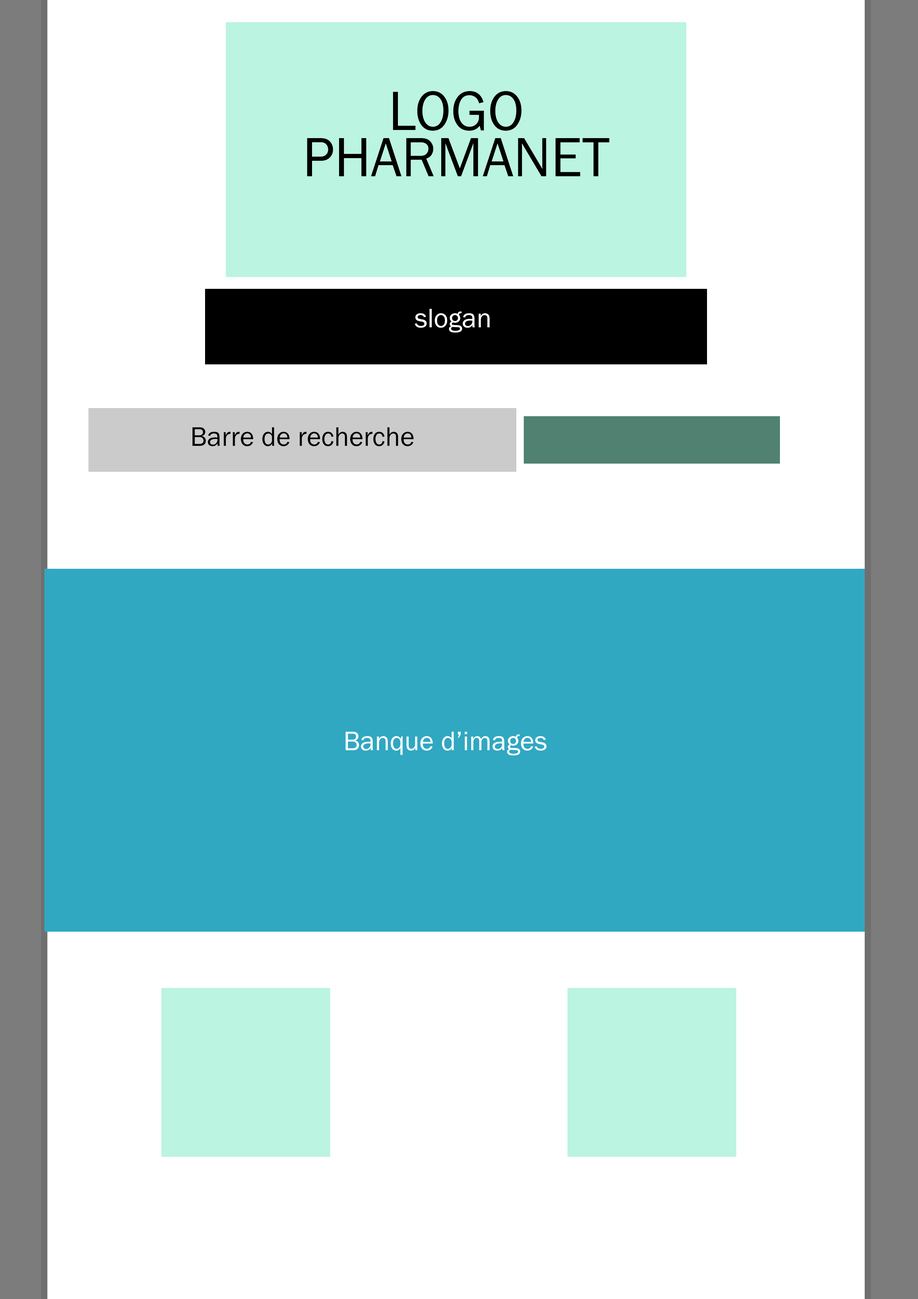
<style>
.page{position:relative;width:918px;height:1299px;background:#ffffff}
.page>*{position:absolute;margin:0}
.t1{font:57.1px/46.3px "FranklinGothic-Book";color:#000000}
.t2{font:27.8px "FranklinGothic-Book";color:#ffffff}
.t3{font:27.8px "FranklinGothic-Book";color:#000000}
</style>
<div class="page">
<p class="t1" style="left:307px;top:91px;width:302px;height:85px;text-align:center">LOGO <br>PHARMANET</p>
<p class="t2" style="left:415px;top:309px;width:75px;height:23px">slogan</p>
<p class="t3" style="left:193px;top:427px;width:221px;height:19px">Barre de recherche</p>
<p class="t2" style="left:345px;top:732px;width:202px;height:23px">Banque d’images</p>
</div>
